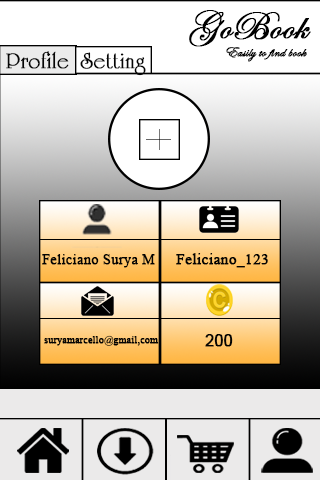
<style>
.page{position:relative;width:320px;height:480px}
.page>*{position:absolute;margin:0}
.t1{font:40px "EdwardianScriptITC";color:#000000;font-weight:bold}
.t2{font:21.7px "UniversityRomanLetPlain";color:#050505;font-weight:bold}
.t3{font:14.3px "EdwardianScriptITC";color:#000000;font-weight:bold}
.t4{font:14.3px "TimesNewRomanPSMT";color:#030303;font-weight:bold}
.t5{font:15.3px "TimesNewRomanPSMT";color:#030303;font-weight:bold}
.t6{font:10px "TimesNewRomanPSMT";color:#030303;font-weight:bold}
.t7{font:16px "ArialMT";color:#030303;font-weight:bold}
</style>
<div class="page">
<p class="t1" style="left:189px;top:10px;width:122px;height:37px">GoBook</p>
<p class="t2" style="left:6px;top:51px;width:63px;height:18px">Profile</p>
<p class="t2" style="left:80px;top:52px;width:66px;height:24px">Setting</p>
<p class="t3" style="left:226px;top:47px;width:81px;height:15px">Easily to find book</p>
<p class="t4" style="left:42px;top:254px;width:113px;height:14px">Feliciano Surya M</p>
<p class="t5" style="left:176px;top:253px;width:92px;height:15px">Feliciano_123</p>
<p class="t6" style="left:44px;top:335px;width:115px;height:11px">suryamarcello@gmail,com</p>
<p class="t7" style="left:205px;top:334px;width:28px;height:13px">200</p>
</div>
